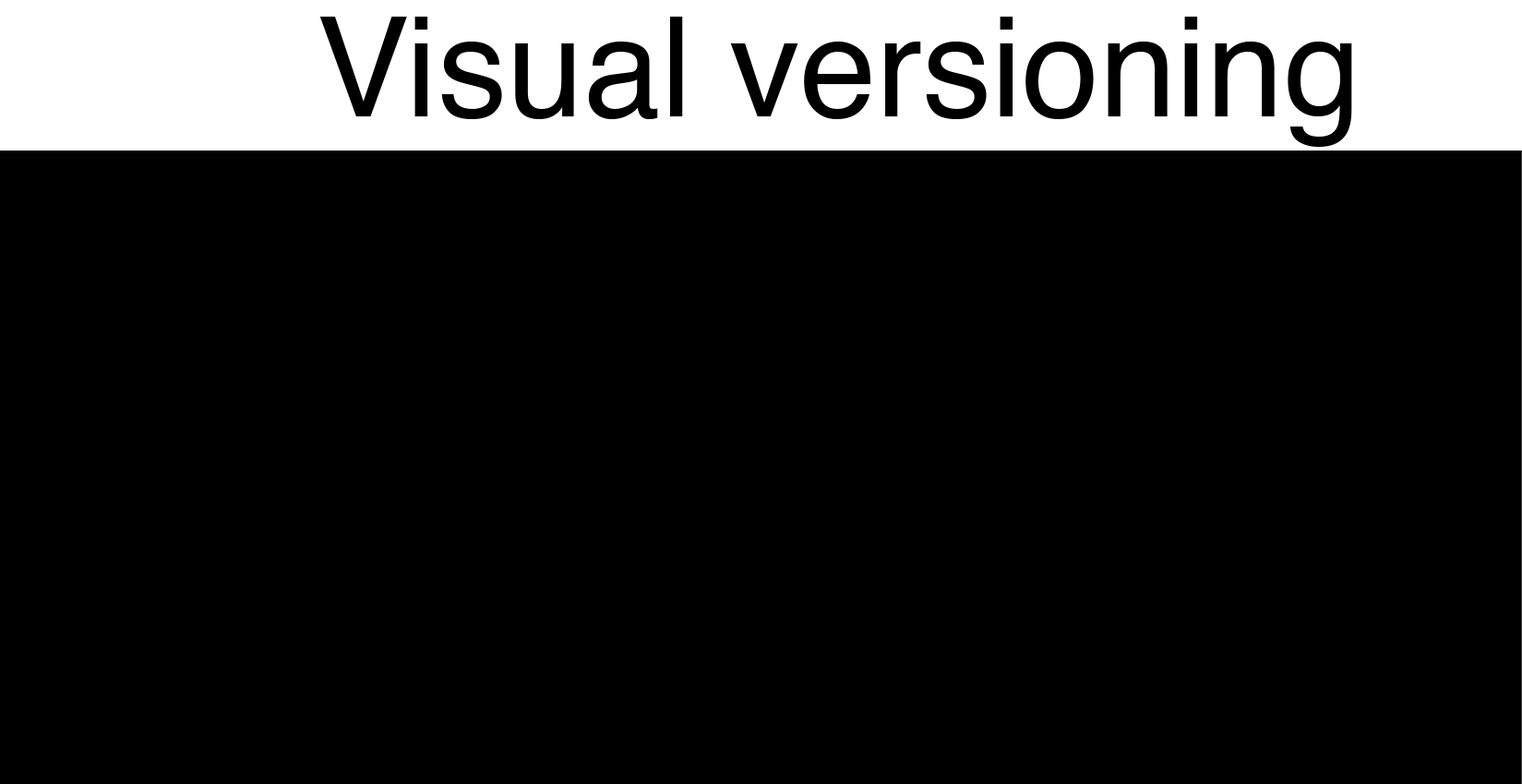
<style>
.page{position:relative;width:1522px;height:784px;background:#000000}
.page>*{position:absolute;margin:0}
.t1{font:138.4px "MyriadPro-Regular";color:#000000}
</style>
<div class="page">
<p class="t1" style="left:319px;top:17px;width:1033px;height:130px">Visual versioning</p>
</div>
